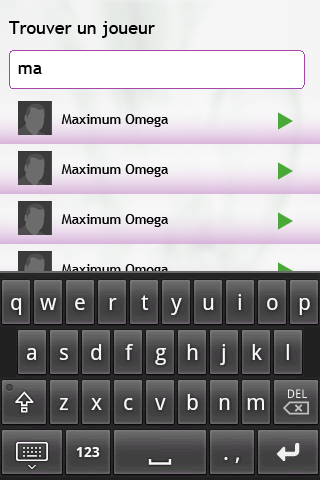
<style>
.page{position:relative;width:320px;height:480px}
.page>*{position:absolute;margin:0}
.t1{font:18px "TrebuchetMS";color:#000000}
.t2{font:14px "TrebuchetMS";color:#000000}
.t3{font:14px "TrebuchetMS"}
</style>
<div class="page">
<p class="t1" style="left:9px;top:21px;width:146px;height:17px">Trouver un joueur</p>
<p class="t1" style="left:18px;top:65px;width:24px;height:9px">ma</p>
<p class="t2" style="left:61px;top:114px;width:107px;height:13px">Maximum Omega</p>
<p class="t2" style="left:61px;top:164px;width:107px;height:13px">Maximum Omega</p>
<p class="t2" style="left:61px;top:214px;width:107px;height:13px">Maximum Omega</p>
<p class="t3" style="left:61px;top:264px;width:107px;height:13px">Maximum Omega</p>
</div>
